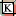
<style>
.page{position:relative;width:16px;height:16px;background:#000000}
.page>*{position:absolute;margin:0}
.t1{font:11px "TimesNewRomanPSMT";letter-spacing:0.05em;color:#000000;text-transform:uppercase}
</style>
<div class="page">
<p class="t1" style="left:4px;top:4px;width:9px;height:8px">k</p>
</div>
